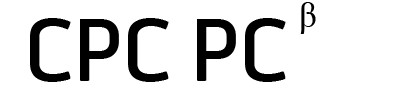
<style>
.page{position:relative;width:406px;height:100px;background:#ffffff}
.page>*{position:absolute;margin:0}
.t1{font:34.7px "TimesNewRomanPSMT";color:#000000}
.t2{font:85.3px "Telenor-Medium";color:#000000}
</style>
<div class="page">
<p class="t1" style="left:300px;top:2px;width:16px;height:32px">β</p>
<p class="t2" style="left:30px;top:18px;width:256px;height:64px">CPC PC</p>
</div>
